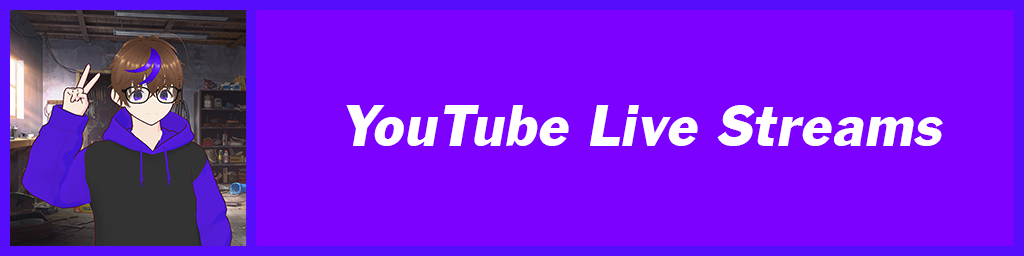
<style>
.page{position:relative;width:1024px;height:256px;background:#7d01ff}
.page>*{position:absolute;margin:0}
.t1{font:61.1px "FranklinGothicITALIC";color:#ffffff}
</style>
<div class="page">
<p class="t1" style="left:346px;top:105px;width:597px;height:41px">YouTube Live Streams</p>
</div>
